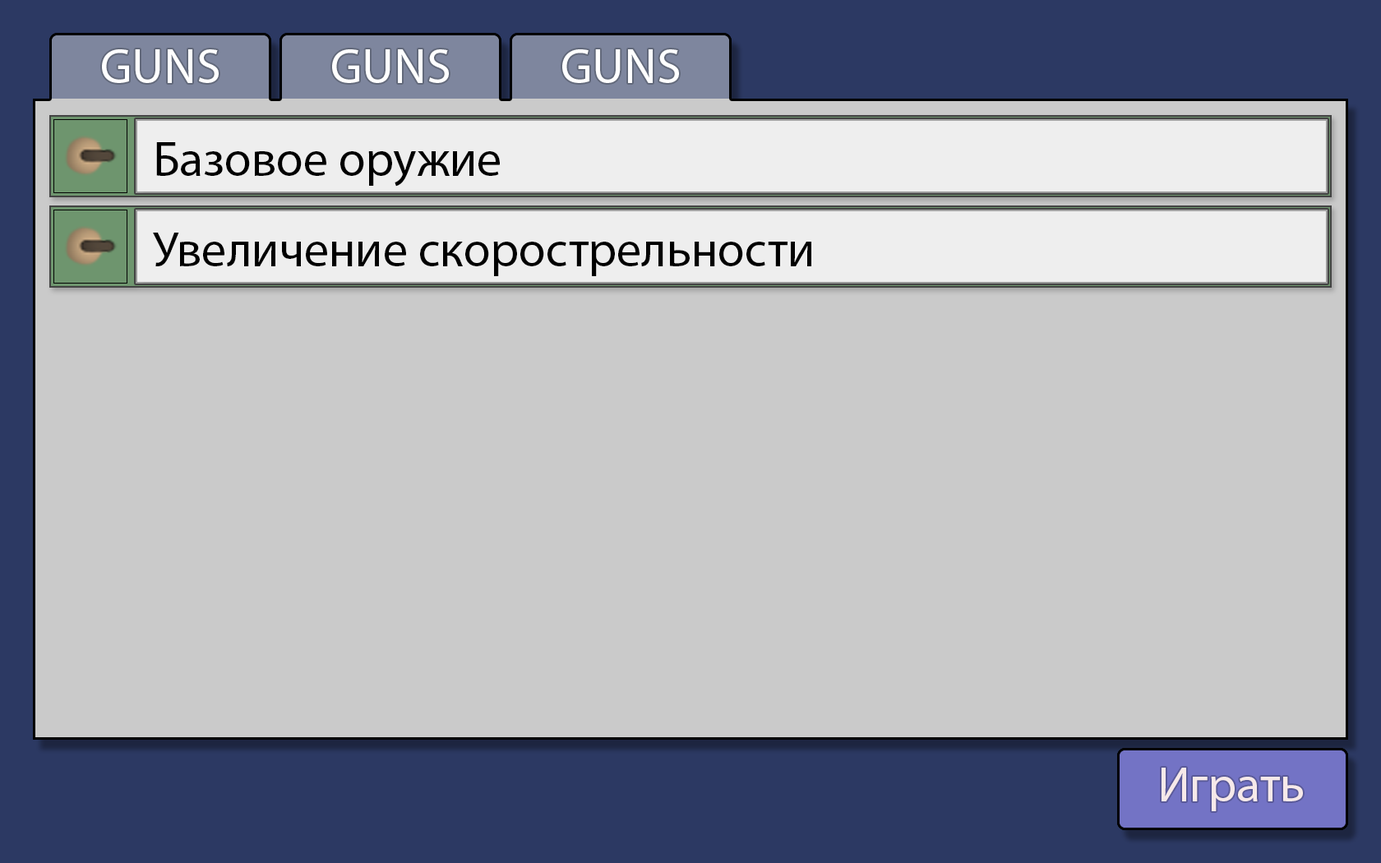
<style>
.page{position:relative;width:1381px;height:863px;background:#cacaca}
.page>*{position:absolute;margin:0}
.t1{font:49.3px "MyriadPro-Regular";color:#ffffff}
.t2{font:49.3px "MyriadPro-Regular";color:#000000}
.t3{font:49.3px "MyriadPro-Regular";color:#f6e9e9}
</style>
<div class="page">
<p class="t1" style="left:102px;top:49px;width:117px;height:34px">GUNS</p>
<p class="t1" style="left:332px;top:49px;width:117px;height:34px">GUNS</p>
<p class="t1" style="left:562px;top:49px;width:117px;height:34px">GUNS</p>
<p class="t2" style="left:156px;top:142px;width:344px;height:45px">Базовое оружие</p>
<p class="t2" style="left:153px;top:233px;width:658px;height:43px">Увеличение скорострельности</p>
<p class="t3" style="left:1162px;top:768px;width:141px;height:43px">Играть</p>
</div>
